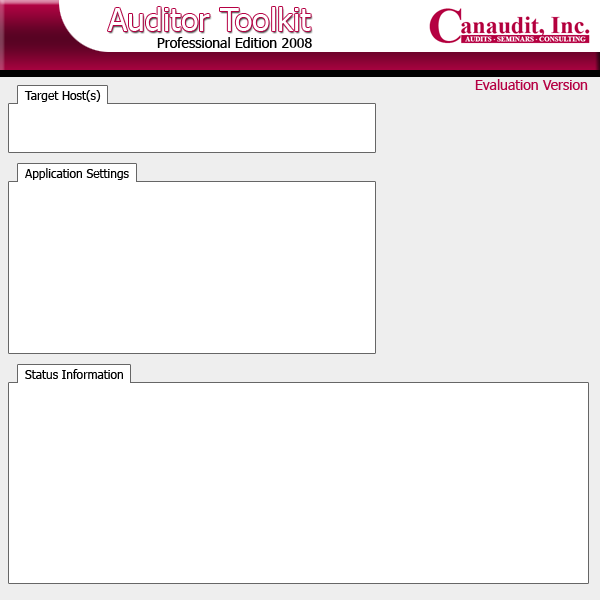
<style>
.page{position:relative;width:600px;height:600px;background:#ffffff}
.page>*{position:absolute;margin:0}
.t1{font:32px "Tahoma";color:#ffffff}
.t2{font:14px "Tahoma";color:#000000}
.t3{font:14px "Tahoma";color:#b50043}
.t4{font:12px "Tahoma";color:#000000}
</style>
<div class="page">
<p class="t1" style="left:108px;top:7px;width:203px;height:24px">Auditor Toolkit</p>
<p class="t2" style="left:157px;top:37px;width:155px;height:11px">Professional Edition 2008</p>
<p class="t3" style="left:475px;top:79px;width:113px;height:11px">Evaluation Version</p>
<p class="t4" style="left:24px;top:90px;width:77px;height:12px">Target Host(s)</p>
<p class="t4" style="left:25px;top:168px;width:104px;height:12px">Application Settings</p>
<p class="t4" style="left:25px;top:369px;width:98px;height:10px">Status Information</p>
</div>
